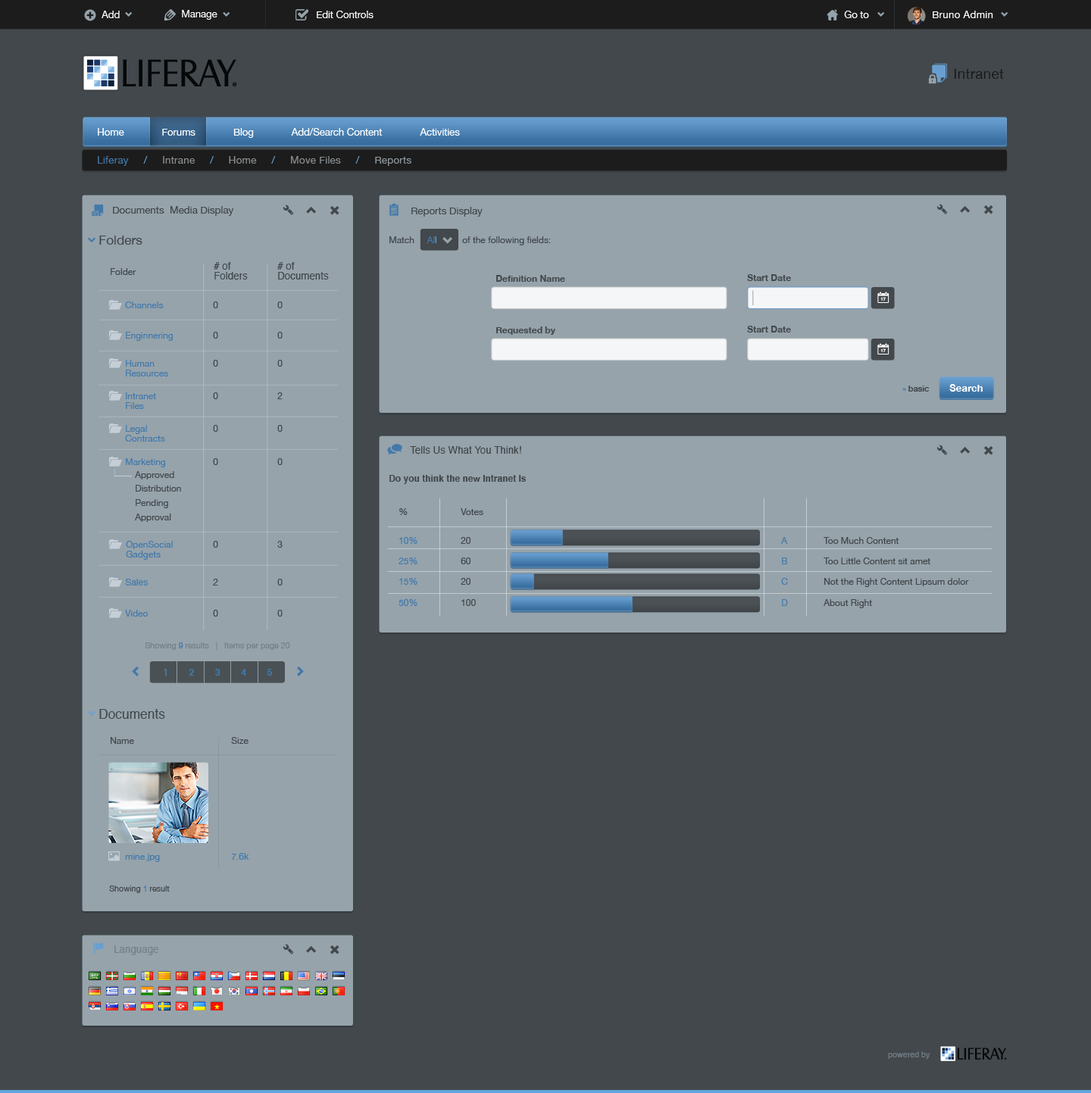
<style>
.page{position:relative;width:1091px;height:1093px;background:#42484c}
.page>*{position:absolute;margin:0}
.t1{font:10.1px "HelveticaNeue";letter-spacing:-0.01em;color:#ffffff}
.t2{font:10.1px "HelveticaNeue";letter-spacing:0.02em;color:#ffffff}
.t3{font:14.1px "HelveticaNeue";letter-spacing:0.02em;color:#1c1c1c}
.t4{font:10.1px "HelveticaNeue";letter-spacing:0.02em;color:#898d90}
.t5{font:10.1px "HelveticaNeue";letter-spacing:0.02em;color:#4379aa}
.t6{font:10.1px "HelveticaNeue";letter-spacing:0.02em;color:#699fd0}
.t7{font:10.1px "HelveticaNeue";letter-spacing:0.02em;color:#8f979e}
.t8{font:10.1px "HelveticaNeue";color:#42484c}
.t9{font:13.1px "HelveticaNeue";color:#42484c}
.t10{font:9.1px "HelveticaNeue";color:#42484c}
.t11{font:9.1px "HelveticaNeue";color:#4379aa}
.t12{font:9.1px "HelveticaNeue";color:#699fd0}
.t13{font:10.1px/10.1px "Helvetica";color:#42484c}
.t14{font:9.1px "HelveticaNeue-Bold";color:#42484c}
.t15{font:9.1px/10.1px "HelveticaNeue";color:#4379aa}
.t16{font:8.1px "HelveticaNeue-Bold";color:#42484c}
.t17{font:8.1px "HelveticaNeue-Bold";color:#4379aa}
.t18{font:10.1px "HelveticaNeue-Bold";color:#ffffff}
.t19{font:10.1px "Helvetica";color:#42484c}
.t20{font:9.1px/14.1px "HelveticaNeue";color:#42484c}
.t21{font:9.1px "Helvetica-Bold";color:#42484c}
.t22{font:9.1px/20.7px "HelveticaNeue";color:#4379aa}
.t23{font:9.1px/28.8px "HelveticaNeue";color:#42484c}
.t24{font:9.1px/28.8px "HelveticaNeue";color:#4379aa}
.t25{font:9.1px/20.7px "HelveticaNeue";color:#42484c}
.t26{font:9.1px "Helvetica";color:#4379aa}
.t27{font:8.1px "HelveticaNeue";color:#747f87}
.t28{font:8.1px "HelveticaNeue";color:#4379aa}
.t29{font:13.1px "Helvetica";color:#42484c}
.t30{font:8.1px "HelveticaNeue";color:#42484c}
.t31{font:10.1px "Helvetica";color:#747f87}
.t32{font:8.1px "Helvetica";color:#747f87}
</style>
<div class="page">
<p class="t1" style="left:102px;top:11px;width:18px;height:7px">Add</p>
<p class="t1" style="left:182px;top:10px;width:35px;height:10px">Manage</p>
<p class="t1" style="left:317px;top:11px;width:56px;height:7px">Edit Controls</p>
<p class="t1" style="left:844px;top:11px;width:25px;height:7px">Go to</p>
<p class="t2" style="left:933px;top:11px;width:60px;height:7px">Bruno Admin</p>
<p class="t3" style="left:954px;top:69px;width:50px;height:10px">Intranet</p>
<p class="t1" style="left:98px;top:128px;width:362px;height:10px">Home              Forums              Blog              Add/Search Content              Activities</p>
<p class="t4" style="left:98px;top:156px;width:313px;height:10px"><span class="t5">Liferay     </span><span class="t6">/     </span>Intrane     <span class="t6">/     </span>Home     <span class="t6">/     </span>Move Files     <span class="t6">/     </span><span class="t7">Reports</span></p>
<p class="t8" style="left:113px;top:206px;width:121px;height:10px">Documents  Media Display</p>
<p class="t8" style="left:411px;top:207px;width:72px;height:10px">Reports Display</p>
<p class="t9" style="left:99px;top:236px;width:43px;height:9px">Folders</p>
<p class="t10" style="left:389px;top:236px;width:162px;height:9px">Match     <span class="t11">Al</span><span class="t12">l          </span>of the following fields:</p>
<p class="t10" style="left:111px;top:268px;width:25px;height:7px">Folder</p>
<p class="t13" style="left:214px;top:262px;width:34px;height:18px"># of <br>Folders</p>
<p class="t13" style="left:277px;top:262px;width:52px;height:18px"># of <br>Documents</p>
<p class="t14" style="left:496px;top:275px;width:69px;height:7px">Definition Name</p>
<p class="t14" style="left:747px;top:274px;width:44px;height:7px">Start Date</p>
<p class="t11" style="left:125px;top:301px;width:39px;height:7px">Channels</p>
<p class="t10" style="left:213px;top:301px;width:5px;height:7px">0</p>
<p class="t10" style="left:277px;top:301px;width:6px;height:7px">0</p>
<p class="t14" style="left:496px;top:326px;width:59px;height:9px">Requested by</p>
<p class="t14" style="left:747px;top:326px;width:44px;height:7px">Start Date</p>
<p class="t11" style="left:126px;top:332px;width:47px;height:9px">Enginnering</p>
<p class="t10" style="left:213px;top:332px;width:5px;height:7px">0</p>
<p class="t10" style="left:277px;top:332px;width:6px;height:7px">0</p>
<p class="t15" style="left:126px;top:360px;width:42px;height:16px">Human<br>Resources</p>
<p class="t10" style="left:213px;top:360px;width:5px;height:7px">0</p>
<p class="t10" style="left:277px;top:360px;width:6px;height:7px">0</p>
<p class="t16" style="left:902px;top:386px;width:27px;height:6px"><span class="t17"> « </span>basic</p>
<p class="t18" style="left:949px;top:384px;width:34px;height:8px">Search</p>
<p class="t15" style="left:126px;top:392px;width:30px;height:17px">Intranet<br>Files</p>
<p class="t10" style="left:213px;top:392px;width:5px;height:7px">0</p>
<p class="t10" style="left:277px;top:392px;width:6px;height:7px">2</p>
<p class="t15" style="left:125px;top:425px;width:40px;height:17px">Legal<br>Contracts</p>
<p class="t10" style="left:213px;top:425px;width:5px;height:7px">0</p>
<p class="t10" style="left:277px;top:425px;width:6px;height:7px">0</p>
<p class="t19" style="left:410px;top:446px;width:111px;height:9px">Tells Us What You Think!</p>
<p class="t11" style="left:126px;top:458px;width:39px;height:9px">Marketing</p>
<p class="t10" style="left:213px;top:458px;width:5px;height:7px">0</p>
<p class="t10" style="left:277px;top:458px;width:6px;height:7px">0</p>
<p class="t20" style="left:135px;top:471px;width:46px;height:51px">Approved<br>Distribution<br>Pending<br>Approval</p>
<p class="t21" style="left:389px;top:475px;width:137px;height:9px">Do you think the new Intranet Is</p>
<p class="t22" style="left:398px;top:508px;width:19px;height:98px"><span class="t23">%<br></span><span class="t24">10%<br></span>25%<br>15%<br>50%</p>
<p class="t25" style="left:461px;top:508px;width:22px;height:98px"><span class="t23">Votes<br>20 <br></span>60<br>20<br>100</p>
<p class="t15" style="left:126px;top:541px;width:47px;height:19px">OpenSocial<br>Gadgets</p>
<p class="t10" style="left:213px;top:541px;width:5px;height:7px">0</p>
<p class="t10" style="left:277px;top:541px;width:6px;height:7px">3</p>
<p class="t22" style="left:781px;top:537px;width:7px;height:69px"><span class="t24"><br>A <br></span>B<br>C<br>D</p>
<p class="t25" style="left:823px;top:537px;width:146px;height:71px"><span class="t23"><br>Too Much Content <br></span>Too Little Content sit amet<br>Not the Right Content Lipsum dolor<br>About Right</p>
<p class="t26" style="left:125px;top:579px;width:23px;height:7px">Sales</p>
<p class="t10" style="left:213px;top:579px;width:5px;height:7px">2</p>
<p class="t10" style="left:277px;top:579px;width:6px;height:7px">0</p>
<p class="t11" style="left:125px;top:610px;width:23px;height:7px">Video</p>
<p class="t10" style="left:213px;top:610px;width:5px;height:7px">0</p>
<p class="t10" style="left:277px;top:610px;width:6px;height:7px">0</p>
<p class="t27" style="left:145px;top:642px;width:145px;height:8px">Showing <span class="t28">9</span> results   |   Items per page 20</p>
<p class="t29" style="left:99px;top:709px;width:66px;height:10px">Documents</p>
<p class="t10" style="left:111px;top:737px;width:23px;height:7px">Name</p>
<p class="t10" style="left:231px;top:737px;width:17px;height:7px">Size</p>
<p class="t11" style="left:125px;top:854px;width:35px;height:8px">mine.jpg</p>
<p class="t11" style="left:231px;top:853px;width:18px;height:7px">7.6k</p>
<p class="t30" style="left:109px;top:886px;width:61px;height:7px">Showing <span class="t28">1 </span>result</p>
<p class="t31" style="left:114px;top:945px;width:44px;height:10px">Language</p>
<p class="t32" style="left:888px;top:1051px;width:42px;height:8px">powered by</p>
</div>
